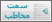
<style>
.page{position:relative;width:52px;height:22px}
.page>*{position:absolute;margin:0}
.t1{font:8px "Tahoma"}
</style>
<div class="page">
<p class="t1" style="left:5px;top:4px;width:25px;height:16px;text-align:center">سمت<br>مخاطب</p>
</div>
